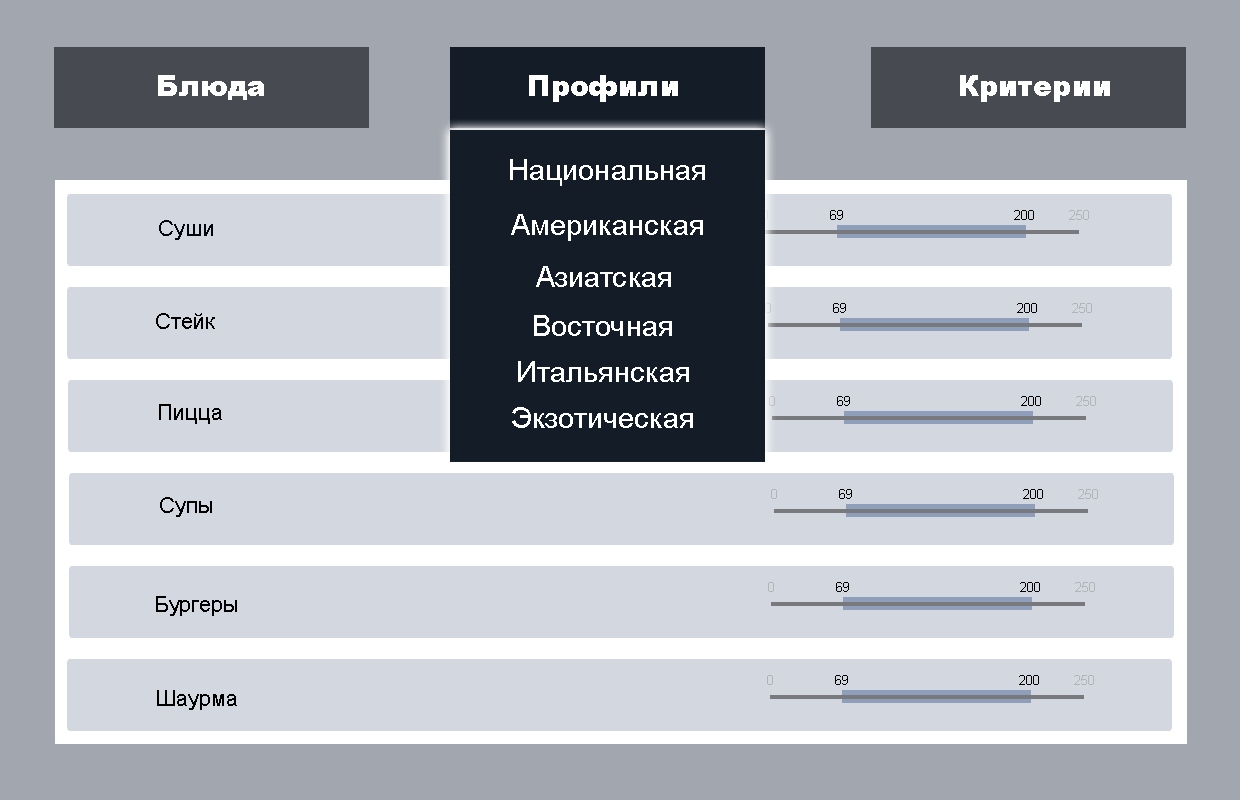
<style>
.page{position:relative;width:1240px;height:800px;background:#d3d7df}
.page>*{position:absolute;margin:0}
.t1{font:28.8px "Arial-Black";letter-spacing:0.003em;color:#ffffff}
.t2{font:28.8px "ArialMT";letter-spacing:0.003em;color:#ffffff}
.t3{font:21.6px "ArialMT";letter-spacing:0.003em;color:#02060e}
.t4{font:13.2px "ArialMT";letter-spacing:0.003em;color:#000000}
.t5{font:13.2px "ArialMT";letter-spacing:0.003em;color:#b2b4b8}
.t6{font:13.2px "ArialMT";letter-spacing:0.003em;color:#dadbdc}
.t7{font:21.6px "ArialMT";letter-spacing:0.003em;color:#000000}
</style>
<div class="page">
<p class="t1" style="left:158px;top:75px;width:106px;height:25px">Блюда</p>
<p class="t1" style="left:529px;top:75px;width:149px;height:27px">Профили</p>
<p class="t1" style="left:960px;top:75px;width:150px;height:27px">Критерии</p>
<p class="t2" style="left:510px;top:159px;width:195px;height:27px">Национальная</p>
<p class="t3" style="left:159px;top:220px;width:54px;height:20px">Суши</p>
<p class="t2" style="left:511px;top:214px;width:192px;height:27px">Американская</p>
<p class="t4" style="left:830px;top:210px;width:13px;height:10px">69</p>
<p class="t4" style="left:1014px;top:210px;width:20px;height:10px">200</p>
<p class="t5" style="left:1069px;top:210px;width:20px;height:10px">250</p>
<p class="t2" style="left:536px;top:266px;width:135px;height:21px">Азиатская</p>
<p class="t6" style="left:765px;top:303px;width:6px;height:10px">0</p>
<p class="t4" style="left:833px;top:303px;width:13px;height:10px">69</p>
<p class="t4" style="left:1017px;top:303px;width:20px;height:10px">200</p>
<p class="t5" style="left:1072px;top:303px;width:20px;height:10px">250</p>
<p class="t7" style="left:156px;top:313px;width:59px;height:16px">Стейк</p>
<p class="t2" style="left:534px;top:315px;width:138px;height:21px">Восточная</p>
<p class="t2" style="left:518px;top:361px;width:171px;height:21px">Итальянская</p>
<p class="t5" style="left:769px;top:396px;width:6px;height:10px">0</p>
<p class="t4" style="left:837px;top:396px;width:13px;height:10px">69</p>
<p class="t4" style="left:1021px;top:396px;width:20px;height:10px">200</p>
<p class="t5" style="left:1076px;top:396px;width:20px;height:10px">250</p>
<p class="t7" style="left:159px;top:404px;width:63px;height:20px">Пицца</p>
<p class="t2" style="left:512px;top:407px;width:181px;height:21px">Экзотическая</p>
<p class="t7" style="left:160px;top:497px;width:52px;height:20px">Супы</p>
<p class="t5" style="left:771px;top:489px;width:6px;height:10px">0</p>
<p class="t4" style="left:839px;top:489px;width:13px;height:10px">69</p>
<p class="t4" style="left:1023px;top:489px;width:20px;height:10px">200</p>
<p class="t5" style="left:1078px;top:489px;width:20px;height:10px">250</p>
<p class="t5" style="left:768px;top:582px;width:6px;height:10px">0</p>
<p class="t4" style="left:836px;top:582px;width:13px;height:10px">69</p>
<p class="t4" style="left:1020px;top:582px;width:20px;height:10px">200</p>
<p class="t5" style="left:1075px;top:582px;width:20px;height:10px">250</p>
<p class="t7" style="left:156px;top:596px;width:81px;height:20px">Бургеры</p>
<p class="t5" style="left:767px;top:675px;width:6px;height:10px">0</p>
<p class="t4" style="left:835px;top:675px;width:13px;height:10px">69</p>
<p class="t4" style="left:1019px;top:675px;width:20px;height:10px">200</p>
<p class="t5" style="left:1074px;top:675px;width:20px;height:10px">250</p>
<p class="t7" style="left:157px;top:690px;width:80px;height:20px">Шаурма</p>
</div>
